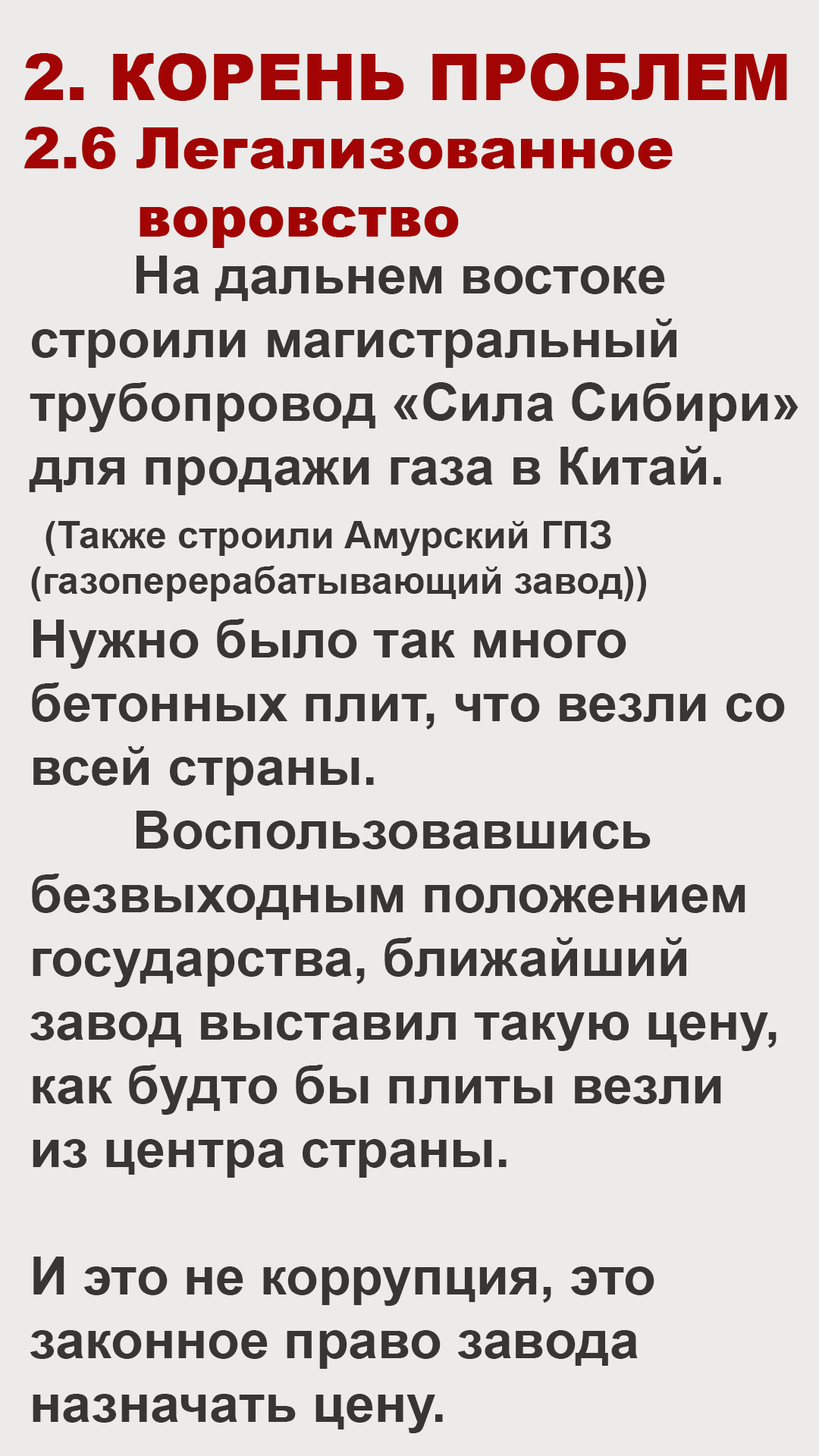
<style>
.page{position:relative;width:819px;height:1456px;background:#ecebe9}
.page>*{position:absolute;margin:0}
.t1{font:56.9px "Arial-Black";color:#a20403}
.t2{font:64.5px "Arial-Black";color:#a20403}
.t3{font:53.1px "Arial-BoldMT";color:#373634}
.t4{font:37.9px "Arial-BoldMT";color:#373634}
</style>
<div class="page">
<p class="t1" style="left:24px;top:53px;width:763px;height:195px"><span class="t2">2. КОРЕНЬ ПРОБЛЕМ<br></span>2.6 Легализованное<br>      воровство</p>
<p class="t3" style="left:29px;top:256px;width:770px;height:1177px">На дальнем востоке <br>строили магистральный <br>трубопровод «Сила Сибири»<br>для продажи газа в Китай.<br> <span class="t4">(Также строили Амурский ГПЗ <br>(газоперерабатывающий завод))<br></span>Нужно было так много<br>бетонных плит, что везли со<br>всей страны.<br>       Воспользовавшись<br>безвыходным положением <br>государства, ближайший <br>завод выставил такую цену,<br>как будто бы плиты везли<br>из центра страны.<br><br>И это не коррупция, это<br>законное право завода<br>назначать цену.</p>
</div>
